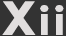
<style>
.page{position:relative;width:66px;height:36px;background:#333333}
.page>*{position:absolute;margin:0}
.t1{font:40px "ContinuumBold";letter-spacing:0.075em;color:#e1dede;scale:1.25 1}
.t2{font:48px "ContinuumBold";letter-spacing:0.075em;color:#e1dede;scale:1.1 1}
</style>
<div class="page">
<p class="t1" style="left:2px;top:1px;width:62px;height:34px"><span class="t2">X</span>ii</p>
</div>
